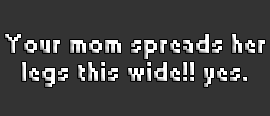
<style>
.page{position:relative;width:270px;height:116px;background:#333333}
.page>*{position:absolute;margin:0}
.t1{font:24px/28px "Small Fonts";font-weight:bold}
</style>
<div class="page">
<p class="t1" style="left:5px;top:34px;width:260px;height:53px;text-align:center">Your mom spreads her<br>legs this wide!! yes.</p>
</div>
